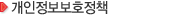
<style>
.page{position:relative;width:180px;height:18px;background:#ffffff}
.page>*{position:absolute;margin:0}
.t1{font:14.7px "YDIYGO330";letter-spacing:-0.03em;color:#373737;scale:0.92 1}
</style>
<div class="page">
<p class="t1" style="left:11px;top:1px;width:97px;height:14px">개인정보보호정책</p>
</div>
